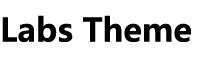
<style>
.page{position:relative;width:200px;height:60px;background:#ffffff}
.page>*{position:absolute;margin:0}
.t1{font:32px "MicrosoftYaHei-Bold";color:#000000}
</style>
<div class="page">
<p class="t1" style="left:2px;top:15px;width:189px;height:27px">Labs Theme</p>
</div>
